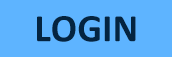
<style>
.page{position:relative;width:173px;height:58px;background:#5eb4ff}
.page>*{position:absolute;margin:0}
.t1{font:39px "Calibri-Bold";color:#042440}
</style>
<div class="page">
<p class="t1" style="left:37px;top:16px;width:99px;height:26px">LOGIN</p>
</div>
